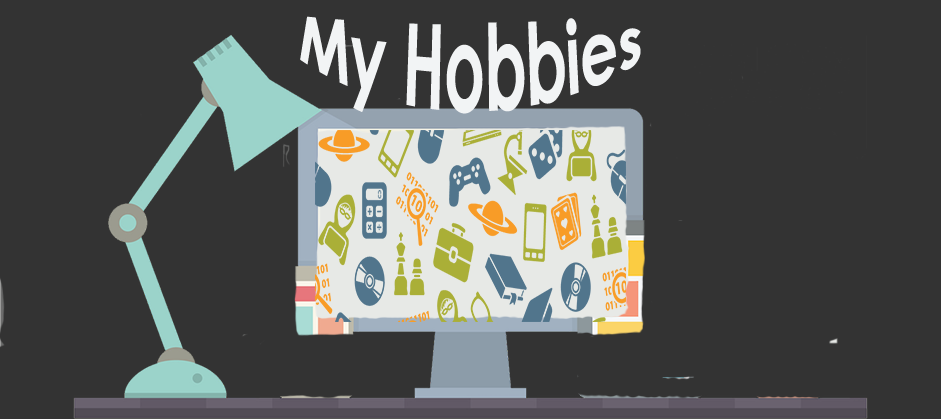
<style>
.page{position:relative;width:941px;height:419px;background:#333333}
.page>*{position:absolute;margin:0}
.t1{font:60px "CenturyGothic-Bold";color:#f2f4f5}
</style>
<div class="page">
<p class="t1" style="left:300px;top:16px;width:341px;height:98px">My Hobbies</p>
</div>
